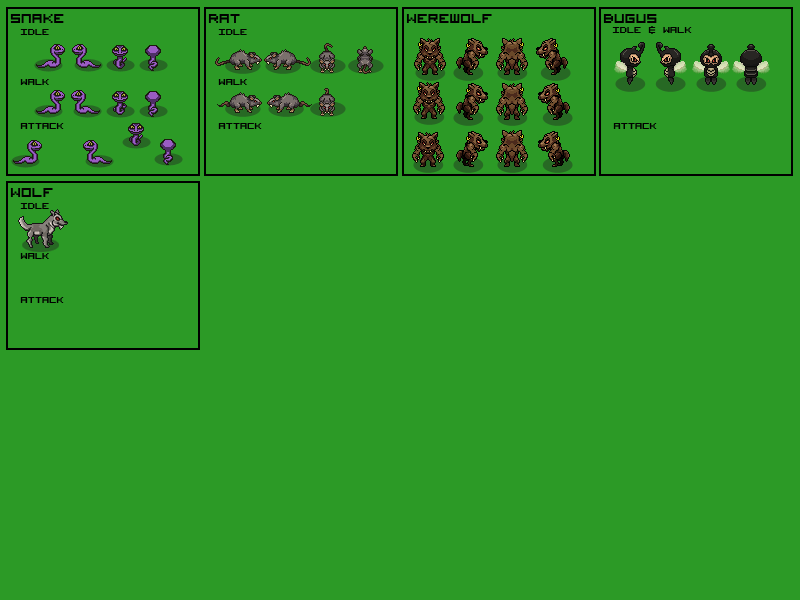
<style>
.page{position:relative;width:800px;height:600px;background:#2c9a26}
.page>*{position:absolute;margin:0}
.t1{font:18px "VisitorTT1BRK";color:#000000}
.t2{font:12px "VisitorTT1BRK";color:#000000}
</style>
<div class="page">
<p class="t1" style="left:10px;top:14px;width:54px;height:9px">Snake</p>
<p class="t1" style="left:208px;top:14px;width:32px;height:9px">Rat</p>
<p class="t1" style="left:406px;top:14px;width:86px;height:9px">Werewolf</p>
<p class="t1" style="left:603px;top:14px;width:54px;height:9px">Bugus</p>
<p class="t2" style="left:20px;top:29px;width:29px;height:6px">Idle</p>
<p class="t2" style="left:218px;top:29px;width:29px;height:6px">Idle</p>
<p class="t2" style="left:612px;top:26px;width:80px;height:8px">Idle &amp; Walk</p>
<p class="t2" style="left:20px;top:79px;width:29px;height:6px">Walk</p>
<p class="t2" style="left:218px;top:79px;width:29px;height:6px">Walk</p>
<p class="t2" style="left:20px;top:123px;width:44px;height:6px">Attack</p>
<p class="t2" style="left:218px;top:123px;width:44px;height:6px">Attack</p>
<p class="t2" style="left:613px;top:123px;width:44px;height:6px">Attack</p>
<p class="t1" style="left:10px;top:188px;width:43px;height:9px">Wolf</p>
<p class="t2" style="left:20px;top:203px;width:29px;height:6px">Idle</p>
<p class="t2" style="left:20px;top:253px;width:29px;height:6px">Walk</p>
<p class="t2" style="left:20px;top:297px;width:44px;height:6px">Attack</p>
</div>
